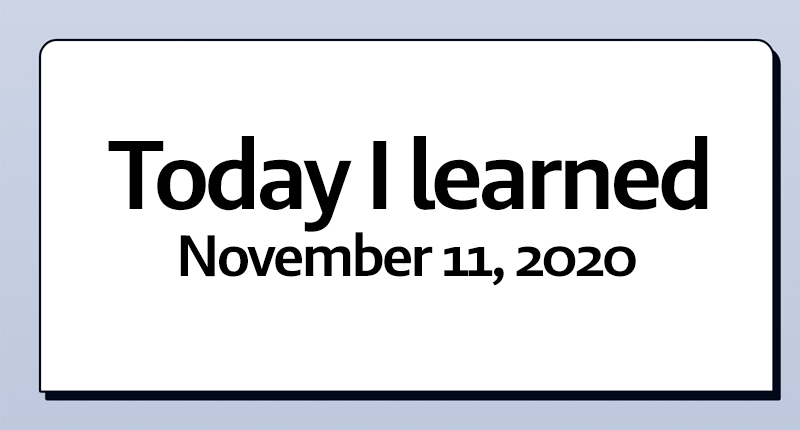
<style>
.page{position:relative;width:800px;height:430px;background:#ffffff}
.page>*{position:absolute;margin:0}
.t1{font:100px "BrandoSansSemiBold";letter-spacing:-0.05em;color:#000000}
.t2{font:60px "BrandoSansSemiBold";letter-spacing:-0.05em;color:#000000}
</style>
<div class="page">
<p class="t1" style="left:108px;top:136px;width:600px;height:96px">Today I learned</p>
<p class="t2" style="left:180px;top:232px;width:456px;height:54px">November 11, 2020</p>
</div>
